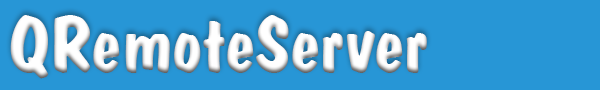
<style>
.page{position:relative;width:600px;height:90px;background:#2796d6}
.page>*{position:absolute;margin:0}
.t1{font:80px "DomBoldBTRusbyme"}
</style>
<div class="page">
<p class="t1" style="left:10px;top:15px;width:417px;height:64px">QRemoteServer</p>
</div>
